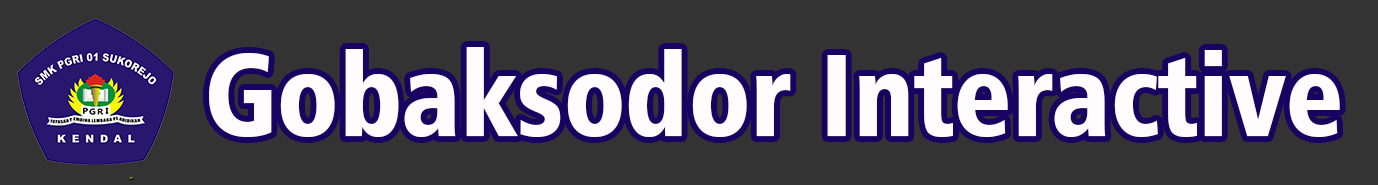
<style>
.page{position:relative;width:1378px;height:185px;background:#333333}
.page>*{position:absolute;margin:0}
.t1{font:116.4px "Humanist777BT-BlackCondensedB";color:#fefcfc;scale:0.96 1}
</style>
<div class="page">
<p class="t1" style="left:209px;top:47px;width:1131px;height:90px">Gobaksodor Interactive</p>
</div>
